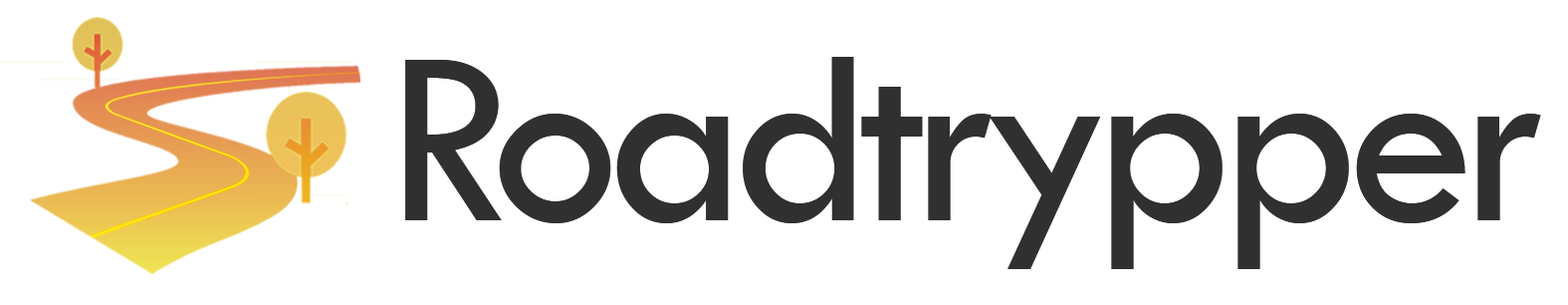
<style>
.page{position:relative;width:1568px;height:305px;background:#ffffff}
.page>*{position:absolute;margin:0}
.t1{font:257.2px "TwCenMT-Regular";letter-spacing:-0.06em;color:#303030}
</style>
<div class="page">
<p class="t1" style="left:405px;top:57px;width:1136px;height:212px">Roadtrypper</p>
</div>
